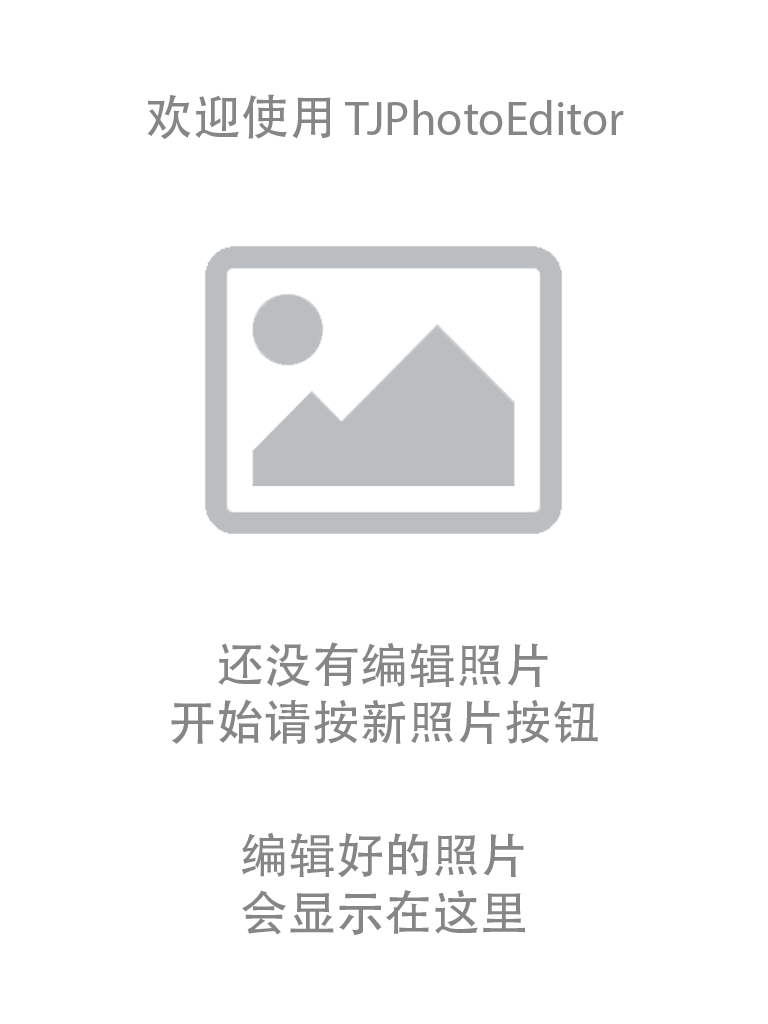
<style>
.page{position:relative;width:768px;height:1024px;background:#ffffff}
.page>*{position:absolute;margin:0}
.t1{font:48px "MyriadPro-Regular";color:#868686}
.t2{font:48px "AdobeHeitiStd-Regular";color:#868686}
</style>
<div class="page">
<p class="t1" style="left:147px;top:94px;width:477px;height:46px"><span class="t2">欢迎使用</span> TJPhotoEditor</p>
<p class="t2" style="left:171px;top:642px;width:427px;height:102px;text-align:center">还没有编辑照片<br>开始请按新照片按钮</p>
<p class="t2" style="left:241px;top:832px;width:284px;height:103px;text-align:center">编辑好的照片<br>会显示在这里</p>
</div>
